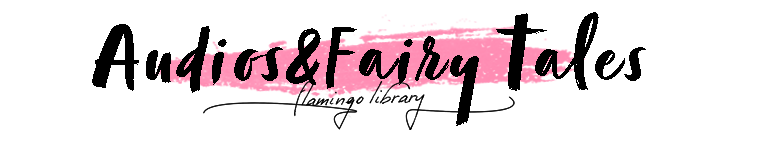
<style>
.page{position:relative;width:766px;height:150px;background:#ffffff}
.page>*{position:absolute;margin:0}
.t1{font:90px "ZoojaPro";letter-spacing:0.05em;color:#000000}
</style>
<div class="page">
<p class="t1" style="left:92px;top:12px;width:554px;height:114px">Audios&amp;Fairy Tales</p>
</div>
